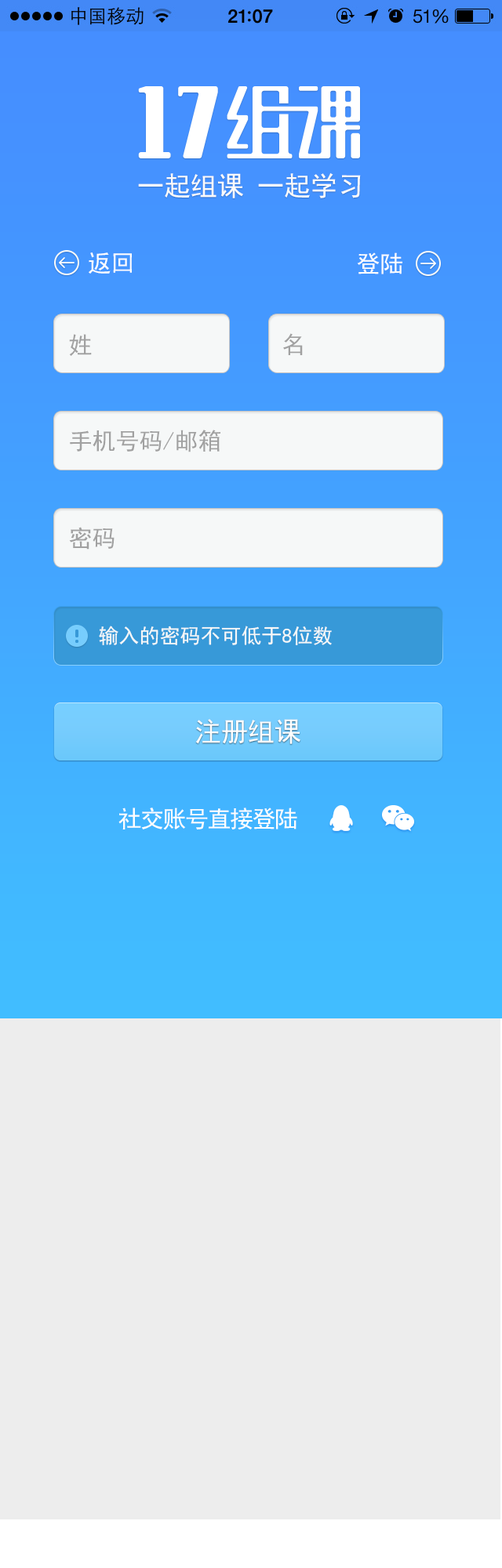
<style>
.page{position:relative;width:502px;height:1568px;background:#ededed}
.page>*{position:absolute;margin:0}
.t1{font:26.7px "SimHei";color:#fbfbfb}
.t2{font:23.5px "SimHei";color:#fefefe}
.t3{font:23.5px "SimHei";color:#a1a1a1}
.t4{font:20.4px "SimHei";color:#f6f8f8}
.t5{font:26.7px "SimHei";color:#fefefe}
.t6{font:23.5px "SimHei";letter-spacing:-0.05em;color:#fefefe}
</style>
<div class="page">
<p class="t1" style="left:138px;top:172px;width:223px;height:26px">一起组课 一起学习</p>
<p class="t2" style="left:89px;top:252px;width:43px;height:22px">返回</p>
<p class="t2" style="left:357px;top:252px;width:45px;height:22px">登陆</p>
<p class="t3" style="left:69px;top:334px;width:23px;height:22px">姓</p>
<p class="t3" style="left:283px;top:333px;width:20px;height:22px">名</p>
<p class="t3" style="left:70px;top:430px;width:150px;height:22px">手机号码/邮箱</p>
<p class="t3" style="left:69px;top:527px;width:45px;height:23px">密码</p>
<p class="t4" style="left:99px;top:626px;width:233px;height:19px">输入的密码不可低于8位数</p>
<p class="t5" style="left:195px;top:719px;width:105px;height:25px">注册组课</p>
<p class="t6" style="left:118px;top:808px;width:179px;height:22px">社交账号直接登陆</p>
</div>
